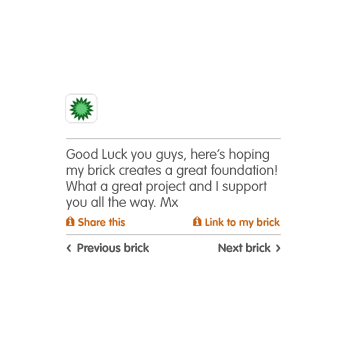
<style>
.page{position:relative;width:350px;height:350px;background:#ffffff}
.page>*{position:absolute;margin:0}
.t1{font:14px/16px "VAGRounded-Light";color:#575757}
.t2{font:11px "VAGRounded-Bold";color:#ca6717}
.t3{font:25px "Isonorm3098-Monospaced";color:#575757}
.t4{font:12px "VAGRounded-Bold";color:#575757}
</style>
<div class="page">
<p class="t1" style="left:66px;top:148px;width:211px;height:62px">Good Luck you guys, here’s hoping my brick creates a great foundation! What a great project and I support you all the way. Mx</p>
<p class="t2" style="left:78px;top:217px;width:47px;height:10px">Share this</p>
<p class="t2" style="left:205px;top:217px;width:75px;height:12px">Link to my brick</p>
<p class="t3" style="left:66px;top:244px;width:5px;height:8px">&lt;</p>
<p class="t4" style="left:77px;top:242px;width:72px;height:11px">Previous brick</p>
<p class="t4" style="left:218px;top:242px;width:53px;height:11px">Next brick</p>
<p class="t3" style="left:276px;top:244px;width:5px;height:8px;rotate:180deg">&lt;</p>
</div>
